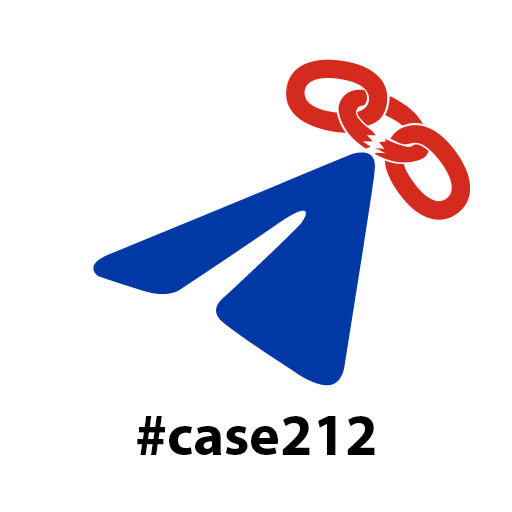
<style>
.page{position:relative;width:512px;height:512px;background:#ffffff}
.page>*{position:absolute;margin:0}
.t1{font:58.3px "MyriadPro-Bold";color:#000000}
</style>
<div class="page">
<p class="t1" style="left:137px;top:416px;width:238px;height:39px">#case212</p>
</div>
